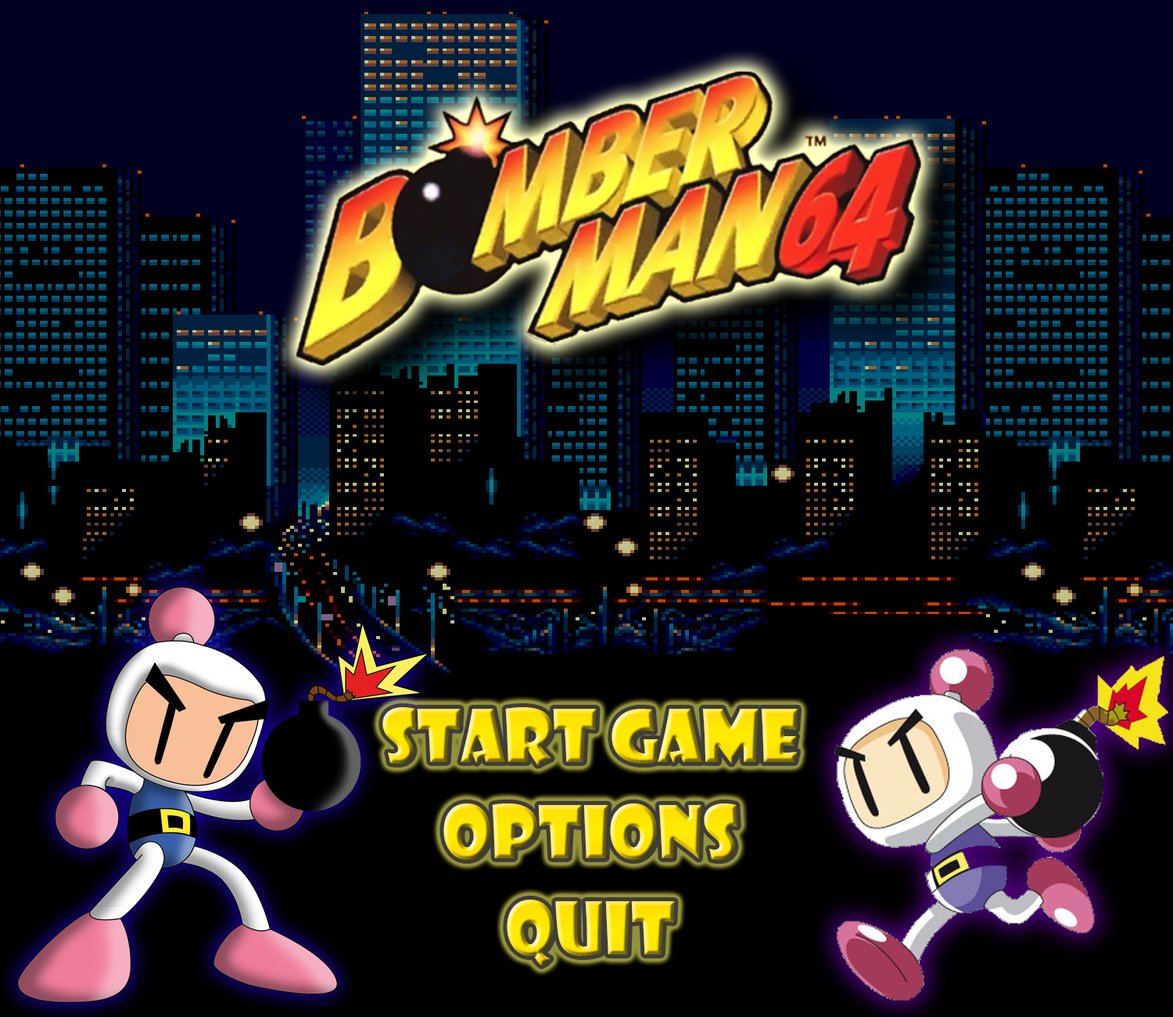
<style>
.page{position:relative;width:1173px;height:1017px;background:#000000}
.page>*{position:absolute;margin:0}
.t1{font:70.4px "ShowcardGothic-Reg"}
</style>
<div class="page">
<p class="t1" style="left:382px;top:707px;width:416px;height:58px">START GAME</p>
<p class="t1" style="left:382px;top:707px;width:416px;height:58px">START GAME</p>
<p class="t1" style="left:443px;top:803px;width:294px;height:56px">OPTIONS</p>
<p class="t1" style="left:443px;top:803px;width:294px;height:56px">OPTIONS</p>
<p class="t1" style="left:507px;top:899px;width:168px;height:66px">QUIT</p>
<p class="t1" style="left:507px;top:899px;width:168px;height:66px">QUIT</p>
</div>
